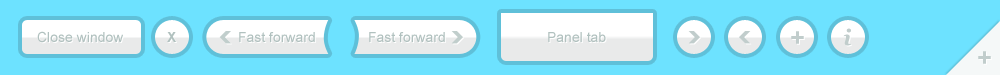
<style>
.page{position:relative;width:1000px;height:75px;background:#6de2ff}
.page>*{position:absolute;margin:0}
.t1{font:22px "Georgia-BoldItalic";color:#c1cdcc}
.t2{font:14px "ArialMT";color:#b1c1bf}
.t3{font:14px "Arial-BoldMT";color:#b1c1bf}
.t4{font:25.1px "Arial-BoldMT";color:#c1cdcc}
</style>
<div class="page">
<p class="t1" style="left:843px;top:28px;width:8px;height:18px">i</p>
<p class="t2" style="left:37px;top:31px;width:86px;height:12px">Close window</p>
<p class="t3" style="left:167px;top:32px;width:9px;height:10px">X</p>
<p class="t2" style="left:239px;top:32px;width:76px;height:10px">Fast forward</p>
<p class="t2" style="left:369px;top:32px;width:76px;height:10px">Fast forward</p>
<p class="t2" style="left:548px;top:32px;width:58px;height:10px">Panel tab</p>
<p class="t4" style="left:791px;top:31px;width:13px;height:13px">+</p>
<p class="t4" style="left:978px;top:51px;width:13px;height:13px">+</p>
</div>
